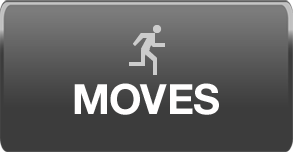
<style>
.page{position:relative;width:293px;height:152px;background:#3c3c3c}
.page>*{position:absolute;margin:0}
.t1{font:41.7px "HelveticaNeue-Bold";color:#fffefe}
</style>
<div class="page">
<p class="t1" style="left:74px;top:83px;width:145px;height:32px">MOVES</p>
</div>
